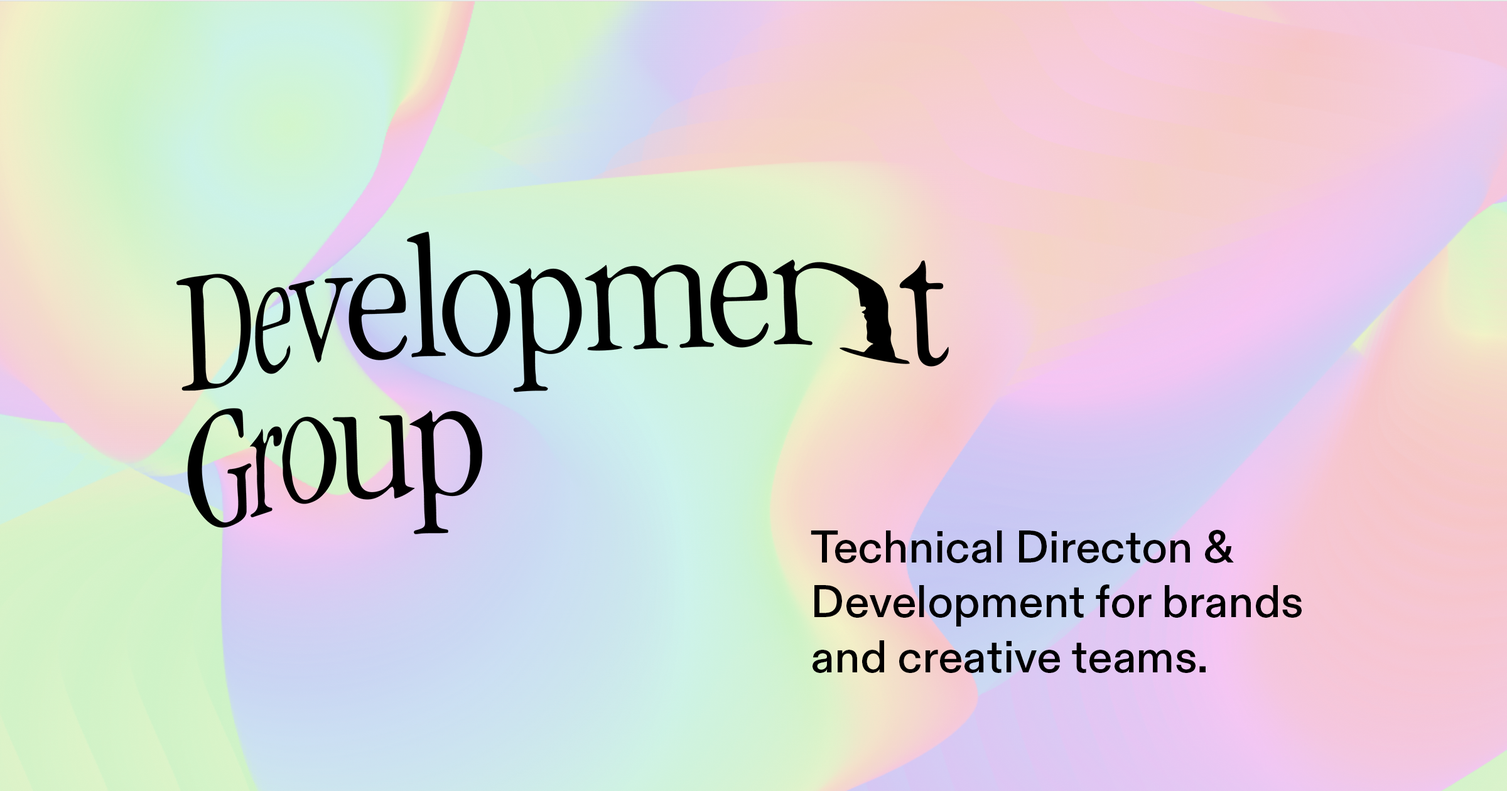
<style>
.page{position:relative;width:1507px;height:791px}
.page>*{position:absolute;margin:0}
.t1{font:45.8px "ABCDiatypeUnlicensedTrial-Medium";color:#000000}
</style>
<div class="page">
<p class="t1" style="left:811px;top:530px;width:491px;height:143px">Technical Directon &amp; Development for brands and creative teams.</p>
</div>
